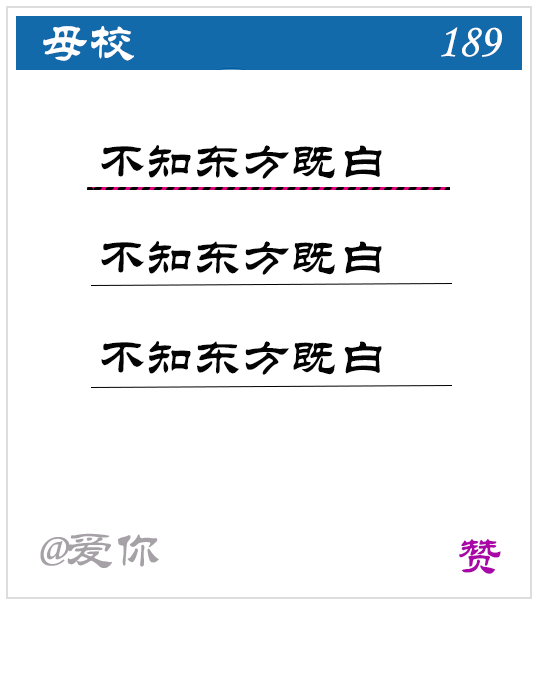
<style>
.page{position:relative;width:540px;height:684px;background:#ffffff}
.page>*{position:absolute;margin:0}
.t1{font:48px "STLiti";color:#ffffff}
.t2{font:48px "STLiti";color:#040404}
</style>
<div class="page">
<p class="t1" style="left:43px;top:26px;width:91px;height:35px">母校</p>
<p class="t1" style="left:441px;top:27px;width:61px;height:30px">189</p>
<p class="t2" style="left:101px;top:145px;width:281px;height:34px">不知东方既白</p>
<p class="t2" style="left:101px;top:241px;width:281px;height:34px">不知东方既白</p>
<p class="t2" style="left:101px;top:341px;width:281px;height:34px">不知东方既白</p>
</div>
